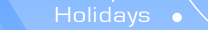
<style>
.page{position:relative;width:208px;height:30px}
.page>*{position:absolute;margin:0}
.t1{font:22.4px "EurostileRegular";letter-spacing:0.02em;color:#fcfdfd;scale:1.2 1}
</style>
<div class="page">
<p class="t1" style="left:55px;top:7px;width:95px;height:20px">Holidays</p>
</div>
